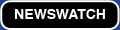
<style>
.page{position:relative;width:120px;height:30px;background:#000000}
.page>*{position:absolute;margin:0}
.t1{font:14px "Helvetica-Bold";color:#ffffff}
</style>
<div class="page">
<p class="t1" style="left:14px;top:9px;width:91px;height:10px">NEWSWATCH</p>
</div>
